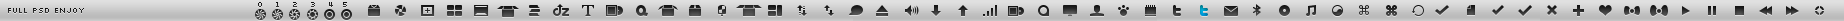
<style>
.page{position:relative;width:1844px;height:21px}
.page>*{position:absolute;margin:0}
.t1{font:8px "Silkscreen";color:#222222}
.t2{font:8px "Silkscreen";color:#212121}
</style>
<div class="page">
<p class="t1" style="left:258px;top:2px;width:89px;height:5px">0   1   2   3   4  5</p>
<p class="t2" style="left:8px;top:8px;width:76px;height:5px">Full PSD enjoy</p>
</div>
